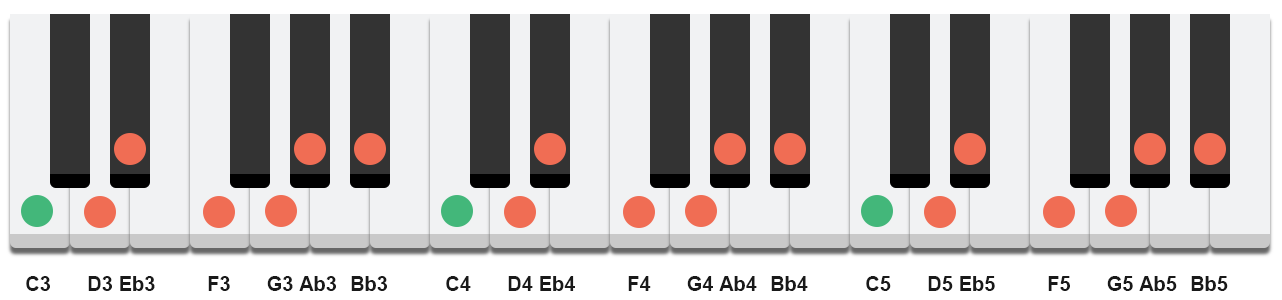
<style>
.page{position:relative;width:1282px;height:300px;background:#f1f2f3}
.page>*{position:absolute;margin:0}
.t1{font:20px "Arial-BoldMT";color:#191919}
</style>
<div class="page">
<p class="t1" style="left:26px;top:276px;width:24px;height:15px">C3</p>
<p class="t1" style="left:88px;top:276px;width:24px;height:15px">D3</p>
<p class="t1" style="left:120px;top:276px;width:35px;height:15px">Eb3</p>
<p class="t1" style="left:208px;top:276px;width:22px;height:15px">F3</p>
<p class="t1" style="left:267px;top:276px;width:26px;height:15px">G3</p>
<p class="t1" style="left:299px;top:276px;width:37px;height:15px">Ab3</p>
<p class="t1" style="left:351px;top:276px;width:36px;height:15px">Bb3</p>
<p class="t1" style="left:446px;top:276px;width:25px;height:15px">C4</p>
<p class="t1" style="left:508px;top:276px;width:25px;height:15px">D4</p>
<p class="t1" style="left:540px;top:276px;width:35px;height:15px">Eb4</p>
<p class="t1" style="left:628px;top:276px;width:23px;height:15px">F4</p>
<p class="t1" style="left:687px;top:276px;width:26px;height:15px">G4</p>
<p class="t1" style="left:719px;top:276px;width:38px;height:15px">Ab4</p>
<p class="t1" style="left:771px;top:276px;width:37px;height:15px">Bb4</p>
<p class="t1" style="left:866px;top:276px;width:25px;height:15px">C5</p>
<p class="t1" style="left:928px;top:276px;width:25px;height:15px">D5</p>
<p class="t1" style="left:960px;top:276px;width:35px;height:15px">Eb5</p>
<p class="t1" style="left:1048px;top:276px;width:22px;height:15px">F5</p>
<p class="t1" style="left:1107px;top:276px;width:26px;height:15px">G5</p>
<p class="t1" style="left:1139px;top:276px;width:38px;height:15px">Ab5</p>
<p class="t1" style="left:1191px;top:276px;width:37px;height:15px">Bb5</p>
</div>
